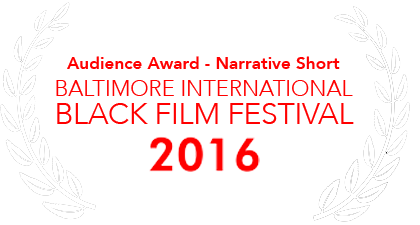
<style>
.page{position:relative;width:420px;height:225px;background:#ffffff}
.page>*{position:absolute;margin:0}
.t1{font:17.2px "Avenir-Heavy";color:#ff0000}
.t2{font:22px "Avenir-Light";color:#ff0000}
.t3{font:29.5px "Avenir-Light";color:#ff0000}
</style>
<div class="page">
<p class="t1" style="left:67px;top:56px;width:273px;height:13px">Audience Award - Narrative Short</p>
<p class="t2" style="left:56px;top:80px;width:297px;height:16px">BALTIMORE INTERNATIONAL</p>
<p class="t3" style="left:57px;top:103px;width:297px;height:21px">BLACK FILM FESTIVAL</p>
</div>
